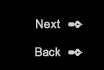
<style>
.page{position:relative;width:104px;height:70px;background:#000000}
.page>*{position:absolute;margin:0}
.t1{font:12.2px "ArialNarrow";color:#cfcfcf;font-weight:bold;scale:1.12 1}
</style>
<div class="page">
<p class="t1" style="left:36px;top:19px;width:25px;height:10px">Next</p>
<p class="t1" style="left:35px;top:47px;width:26px;height:10px">Back</p>
</div>
